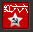
<style>
.page{position:relative;width:33px;height:32px;background:#c50000}
.page>*{position:absolute;margin:0}
.t1{font:10.4px "SimSun";letter-spacing:-0.25em;color:#ffffff}
</style>
<div class="page">
<p class="t1" style="left:4px;top:4px;width:24px;height:9px">红六六</p>
</div>
